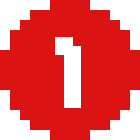
<style>
.page{position:relative;width:140px;height:140px;background:#dc1313}
.page>*{position:absolute;margin:0}
.t1{font:106px "04b25";letter-spacing:0.014em;color:#ffffff}
</style>
<div class="page">
<p class="t1" style="left:55px;top:37px;width:26px;height:71px">1</p>
</div>
